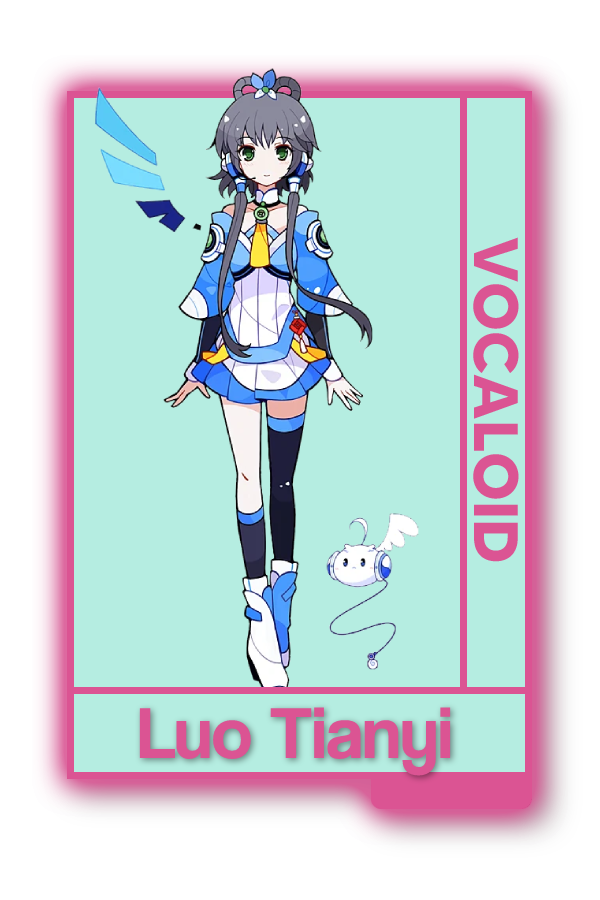
<style>
.page{position:relative;width:600px;height:900px;background:#b5ede1}
.page>*{position:absolute;margin:0}
.t1{font:62.5px "MADETOMMY-Bold";color:#db5493}
.t2{font:75px "CoolveticaRg-Regular";color:#db5493}
</style>
<div class="page">
<p class="t1" style="left:473px;top:237px;width:46px;height:325px;rotate:90deg">VOCALOID</p>
<p class="t2" style="left:139px;top:707px;width:312px;height:69px">Luo Tianyi</p>
</div>
